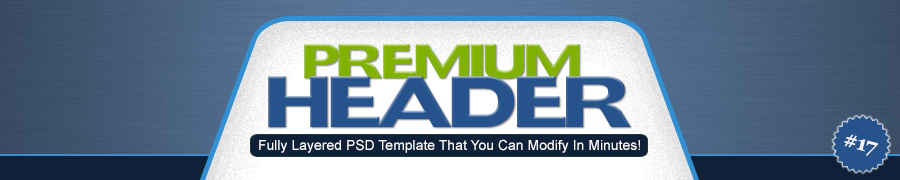
<style>
.page{position:relative;width:900px;height:180px}
.page>*{position:absolute;margin:0}
.t1{font:48px "DoradoHeadline";letter-spacing:-0.05em;color:#81b103;text-transform:uppercase}
.t2{font:72px "DoradoHeadline";letter-spacing:-0.05em;color:#26538c;text-transform:uppercase}
.t3{font:21px "Georgia-Bold";letter-spacing:-0.05em;color:#f7f7f7}
.t4{font:14px "ArialMT";color:#ffffff}
</style>
<div class="page">
<p class="t1" style="left:304px;top:44px;width:276px;height:35px">Premium</p>
<p class="t2" style="left:268px;top:76px;width:363px;height:51px">Header</p>
<p class="t3" style="left:844px;top:134px;width:35px;height:22px;rotate:15deg">#17</p>
<p class="t4" style="left:259px;top:139px;width:381px;height:14px">Fully Layered PSD Template That You Can Modify In Minutes!</p>
</div>
